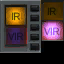
<style>
.page{position:relative;width:64px;height:64px;background:#000000}
.page>*{position:absolute;margin:0}
.t1{font:10.5px "ArialMT";letter-spacing:-0.04em;color:#523c08;scale:0.94 1}
.t2{font:10.5px "ArialMT";letter-spacing:-0.04em;color:#181000;scale:0.94 1}
.t3{font:10.5px "ArialMT";letter-spacing:-0.04em;scale:0.94 1}
.t4{font:10.5px "ArialMT";letter-spacing:-0.04em;color:#181029;scale:0.94 1}
</style>
<div class="page">
<p class="t1" style="left:11px;top:12px;width:9px;height:9px">IR</p>
<p class="t2" style="left:47px;top:7px;width:9px;height:9px">IR</p>
<p class="t3" style="left:44px;top:27px;width:15px;height:9px">VIR</p>
<p class="t4" style="left:8px;top:32px;width:15px;height:9px">VIR</p>
</div>
